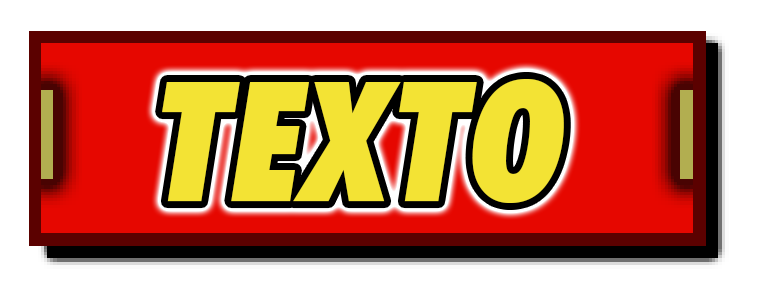
<style>
.page{position:relative;width:757px;height:299px;background:#ffffff}
.page>*{position:absolute;margin:0}
.t1{font:166.4px "FuturaBT-ExtraBlackCondItalic";color:#f3e334}
</style>
<div class="page">
<p class="t1" style="left:162px;top:79px;width:402px;height:124px">TEXTO</p>
</div>
